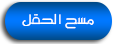
<style>
.page{position:relative;width:115px;height:44px}
.page>*{position:absolute;margin:0}
.t1{font:20.4px "MO_Nawel";letter-spacing:-0.08em;color:#ffffff}
</style>
<div class="page">
<p class="t1" style="left:22px;top:13px;width:72px;height:16px">مسح   ا  لحقل</p>
</div>
